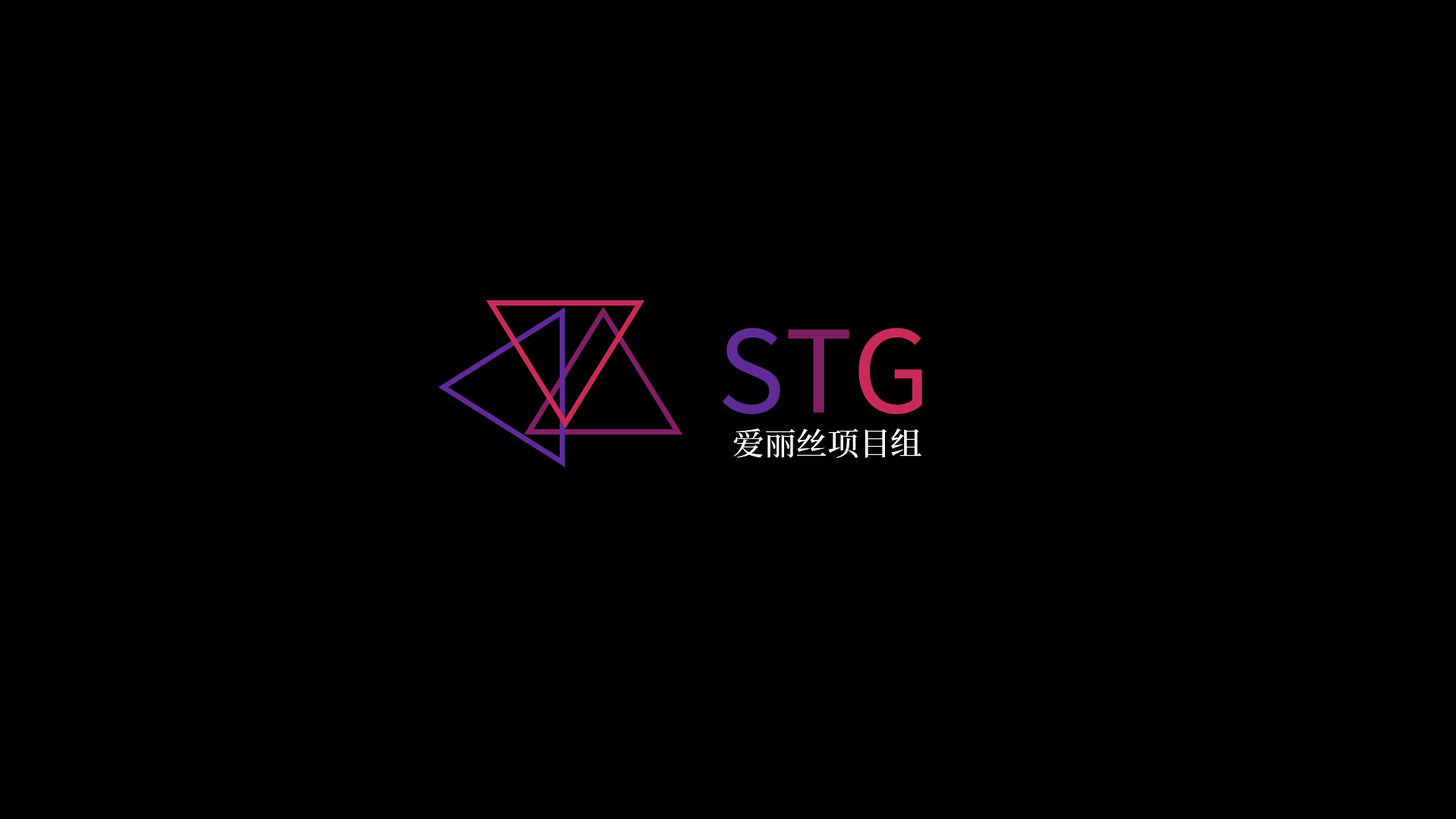
<style>
.page{position:relative;width:1456px;height:819px;background:#000000}
.page>*{position:absolute;margin:0}
.t1{font:126.4px "SourceSansRoman-Regular";color:#5f2b96}
.t2{font:126.4px "SourceSansRoman-Regular";color:#811f65}
.t3{font:126.4px "SourceSansRoman-Regular";color:#c92b58}
.t4{font:31.6px "SourceHanSerifCN-Medium";color:#ffffff}
</style>
<div class="page">
<p class="t1" style="left:723px;top:328px;width:199px;height:87px">S<span class="t2">T</span><span class="t3">G</span></p>
<p class="t4" style="left:733px;top:428px;width:188px;height:30px">爱丽丝项目组</p>
</div>
